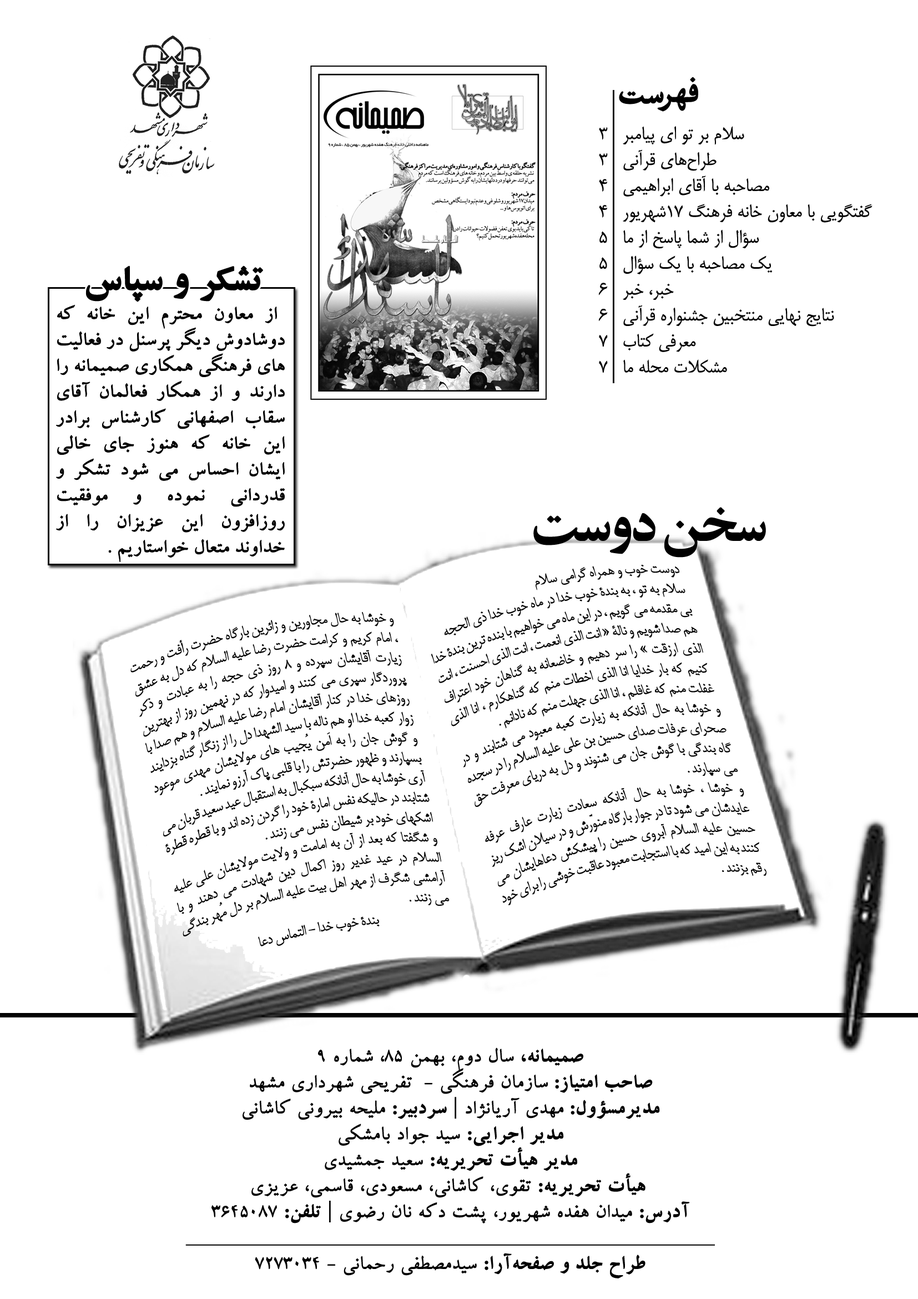
<style>
.page{position:relative;width:918px;height:1299px;background:#ffffff}
.page>*{position:absolute;margin:0}
.t1{font:21.6px "BMitra";color:#000000}
.t2{font:37px "BZarBold";color:#000000;font-weight:bold}
.t3{font:21.6px "BZar";color:#000000;font-weight:bold}
.t4{font:55.5px "BZarBold";letter-spacing:-0.05em;color:#000000}
.t5{font:17.3px "BMitra";letter-spacing:-0.025em;color:#000000;scale:0.96 1}
.t6{font:17px "BMitra";letter-spacing:-0.025em;color:#000000}
.t7{font:21.6px "BCompset";color:#000000;font-weight:bold}
.t8{font:21.6px "BCompsetBold";color:#000000;font-weight:bold}
</style>
<div class="page">
<p class="t1" style="left:599px;top:126px;width:274px;height:247px;text-align:right">سلام بر تو اي پيامبر   3<br>طراح‌هاي قرآني   3<br>مصاحبه با آقاي ابراهيمي   4<br>گفتگويي با معاون خانه فرهنگ 17شهريور   4<br>سؤال از شما پاسخ از ما   5<br>يك مصاحبه با يك سؤال   5<br>خبر، خبر   6<br>نتايج نهايي منتخبين جشنواره قرآني   6<br>معرفي كتاب   7<br>مشكلات محله ما   7</p>
<p class="t2" style="left:85px;top:265px;width:178px;height:37px">تشکر و سپاس</p>
<p class="t3" style="left:56px;top:305px;width:229px;height:257px;text-align:justify">از معاون محترم اين خانه که دوشادوش ديگر پرسنل در فعاليت هاي فرهنگي همکاري صميمانه را دارند و از همکار فعالمان آقاي سقاب اصفهاني کارشناس برادر اين خانه که هنوز جاي خالي ايشان احساس مي شود تشکر و قدرداني نموده و موفقيت روزافزون اين عزيزان را از خداوند متعال خواستاريم .</p>
<p class="t4" style="left:534px;top:507px;width:232px;height:50px">سخن دوست</p>
<p class="t5" style="left:431px;top:564px;width:336px;height:341px;text-align:justify;rotate:-11deg">دوست خوب و همراه گرامي سلام <br>سلام به تو ، به بندۀ خوب خدا در ماه خوب خدا ذي الحجه <br>بي مقدمه مي گويم ، در اين ماه مي خواهيم با بنده ترين بندۀ خدا هم صدا شويم و نالۀ « انت الذي انعمت ، انت الذي احسنت ، انت الذي ارزقت » را سر دهيم و خاضعانه به گناهان خود اعتراف کنيم که بار خدايا انا الذي اخطات منم که گناهکارم ، انا الذي غفلت منم که غافلم ، انا الذي جهلت منم که نادانم .<br>و خوشا به حال آنانکه به زيارت کعبه معبود مي شتابند و در صحراي عرفات صداي حسين بن علي عليه السلام را در سجده گاه بندگي با گوش جان مي شنوند و دل به درياي معرفت حق مي سپارند . <br>و خوشا ، خوشا به حال آنانکه سعادت زيارت عارف عرفه عايدشان مي شود تا در جوار بارگاه منوّرش و در سيلان اشک ريز حسين عليه السلام آبروي حسين را پيشکش دعاهايشان مي کنند به اين اميد که با استجابت معبود عاقبت خوشي را براي خود رقم بزنند .</p>
<p class="t6" style="left:130px;top:611px;width:320px;height:335px;text-align:justify;rotate:-11deg">و خوشا به حال مجاورين و زائرين بارگاه حضرت رأفت و رحمت ، امام کريم و کرامت حضرت رضا عليه السلام که دل به عشق زيارت آقايشان سپرده و 8 روز ذي حجه را به عبادت و ذکر پروردگار سپري مي کنند و اميدوار که در نهمين روز از بهترين روزهاي خدا در کنار آقايشان امام رضا عليه السلام و هم صدا با زوار کعبه خدا او هم ناله با سيد الشهدا دل را از زنگار گناه بزدايند و گوش جان را به اَمن يُجيب هاي مولايشان مهدي موعود بسپارند و ظهور حضرتش را با قلبي پاک آرزو نمايند . <br>آري خوشا به حال آنانکه سبکبال به استقبال عيد سعيد قربان مي شتابند در حاليکه نفس امارۀ خود را گردن زده اند و با قطره قطرۀ اشکهاي خود بر شيطان نفس مي زنند . <br>و شگفتا که بعد از آن به امامت و ولايت مولايشان علي عليه السلام در عيد غدير روز اکمال دين شهادت مي دهند و با آرامشي شگرف از مهر اهل بيت عليه السلام بر دل مُهر بندگي مي زنند . <br>بندۀ خوب خدا - التماس دعا</p>
<p class="t7" style="left:185px;top:1047px;width:530px;height:231px;text-align:center"><span class="t8">صميمانه،</span> سال د‌وم، بهمن 85، شماره 9<br><span class="t8">صاحب امتياز: </span>سازمان فرهنگي -  تفريحي شهرد‌اري مشهد<br><span class="t8">مد‌يرمسؤول: </span>مهد‌ي آريانژاد | <span class="t8">سرد‌بير:</span> مليحه بيروني کاشاني<br><span class="t8">مد‌ير اجرايي:</span> سيد جواد بامشکي<br><span class="t8">مد‌ير هيأت تحريريه:</span> سعيد جمشيد‌ي<br><span class="t8"> هيأت تحريريه:</span> تقوي، كاشاني، مسعود‌ي، قاسمي، عزيزي<br><span class="t8">آد‌رس:</span> ميد‌ان هفد‌ه شهريور، پشت د‌كه نان رضوي | <span class="t8">تلفن:</span> 3645087<br>_________________________________________________<br><span class="t8">طراح جلد و صفحه‌آرا:</span> سيد‌مصطفي رحماني - 7273034</p>
</div>
